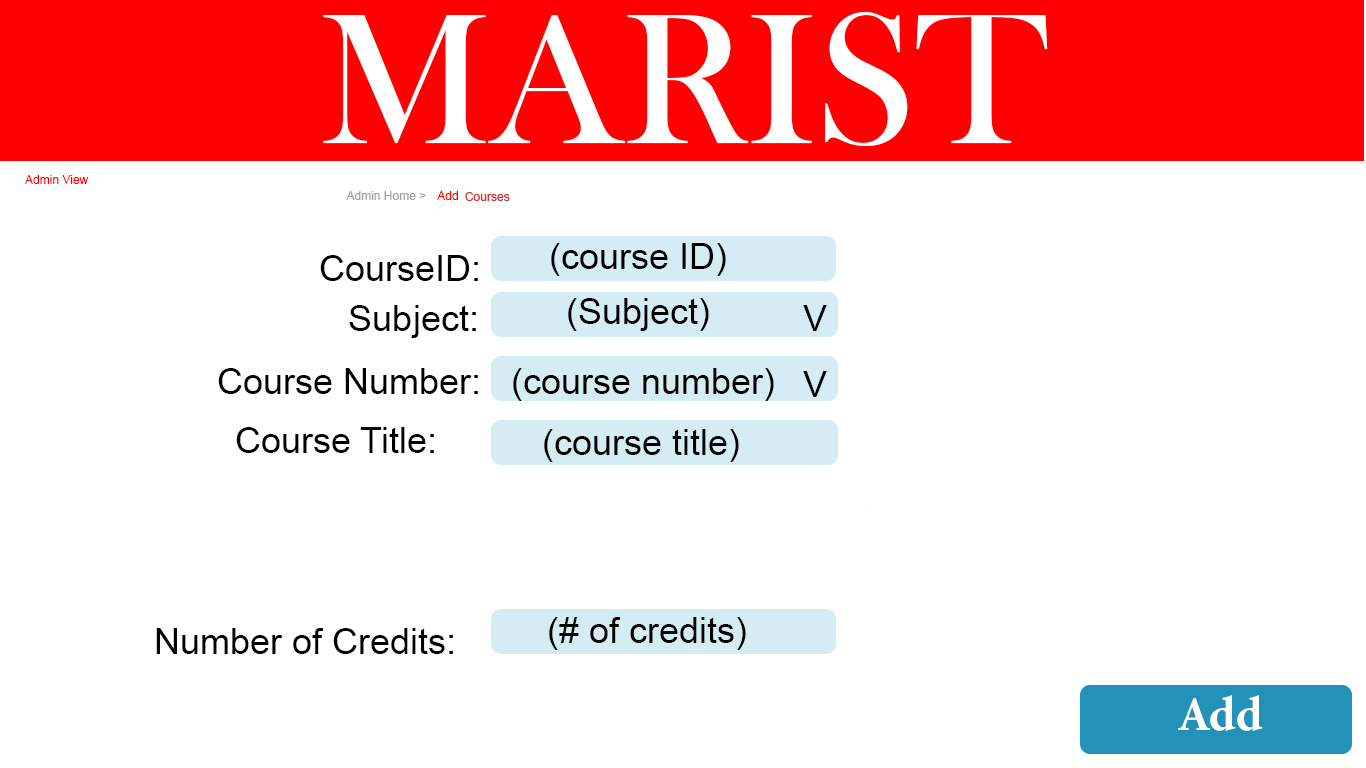
<style>
.page{position:relative;width:1366px;height:768px;background:#ffffff}
.page>*{position:absolute;margin:0}
.t1{font:12px "ArialMT";color:#ff0000}
.t2{font:12px "ArialMT";color:#a39f9f}
.t3{font:36px "ArialMT";color:#000000}
.t4{font:48px "ArialMT";color:#000000}
.t5{font:48px "MinionPro-Bold";color:#ffffff}
</style>
<div class="page">
<p class="t1" style="left:25px;top:175px;width:64px;height:9px">Admin View</p>
<p class="t2" style="left:346px;top:191px;width:80px;height:9px">Admin Home &gt;</p>
<p class="t1" style="left:437px;top:191px;width:21px;height:9px">Add</p>
<p class="t3" style="left:551px;top:243px;width:175px;height:33px">(course ID)</p>
<p class="t3" style="left:320px;top:255px;width:158px;height:26px">CourseID:</p>
<p class="t3" style="left:349px;top:305px;width:127px;height:33px">Subject:</p>
<p class="t3" style="left:568px;top:298px;width:141px;height:33px">(Subject)</p>
<p class="t3" style="left:803px;top:305px;width:24px;height:26px">V</p>
<p class="t3" style="left:218px;top:368px;width:260px;height:26px">Course Number:</p>
<p class="t3" style="left:513px;top:368px;width:261px;height:33px">(course number)</p>
<p class="t3" style="left:803px;top:371px;width:24px;height:26px">V</p>
<p class="t3" style="left:236px;top:427px;width:198px;height:26px">Course Title:</p>
<p class="t3" style="left:544px;top:429px;width:195px;height:33px">(course title)</p>
<p class="t3" style="left:549px;top:617px;width:197px;height:33px"><span class="t4">    </span>(# of credits)</p>
<p class="t3" style="left:156px;top:628px;width:297px;height:26px">Number of Credits:</p>
<p class="t5" style="left:1178px;top:695px;width:85px;height:36px">Add</p>
</div>
